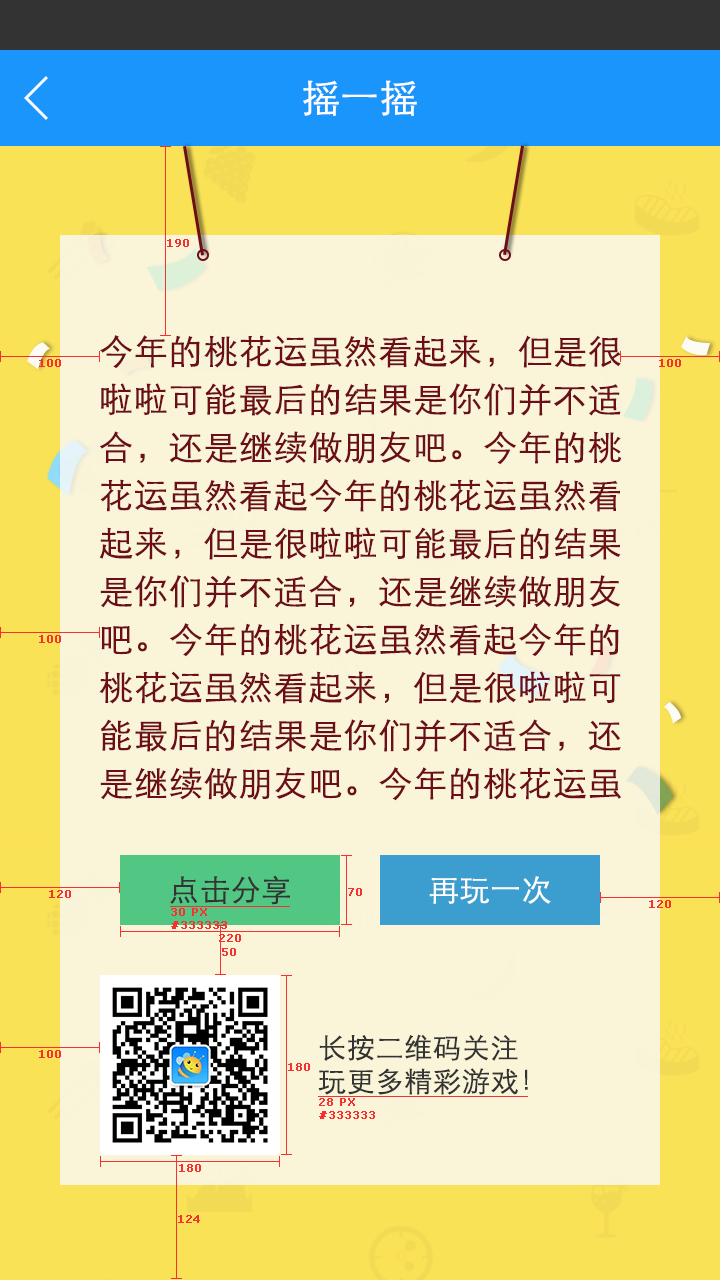
<style>
.page{position:relative;width:720px;height:1280px;background:#faf5d9}
.page>*{position:absolute;margin:0}
.t1{font:38px "STXihei";color:#ffffff;font-weight:bold}
.t2{font:11px "Verdana";color:#f83030;font-weight:bold}
.t3{font:34px/48px "STXihei";color:#6d0d18;font-weight:bold}
.t4{font:30px "STXihei";color:#333333;font-weight:bold}
.t5{font:30px "STXihei";color:#ffffff;font-weight:bold}
.t6{font:28px "STXihei";color:#333333;font-weight:bold}
</style>
<div class="page">
<p class="t1" style="left:303px;top:80px;width:114px;height:36px">摇一摇</p>
<p class="t2" style="left:167px;top:239px;width:22px;height:8px">190</p>
<p class="t3" style="left:99px;top:335px;width:523px;height:466px">今年的桃花运虽然看起来，但是很<br>啦啦可能最后的结果是你们并不适<br>合，还是继续做朋友吧。今年的桃<br>花运虽然看起今年的桃花运虽然看<br>起来，但是很啦啦可能最后的结果<br>是你们并不适合，还是继续做朋友<br>吧。今年的桃花运虽然看起今年的<br>桃花运虽然看起来，但是很啦啦可<br>能最后的结果是你们并不适合，还<br>是继续做朋友吧。今年的桃花运虽</p>
<p class="t2" style="left:39px;top:359px;width:22px;height:8px">100</p>
<p class="t2" style="left:659px;top:359px;width:22px;height:8px">100</p>
<p class="t2" style="left:39px;top:635px;width:22px;height:8px">100</p>
<p class="t4" style="left:170px;top:875px;width:120px;height:30px">点击分享</p>
<p class="t5" style="left:429px;top:876px;width:122px;height:28px">再玩一次</p>
<p class="t2" style="left:49px;top:890px;width:22px;height:8px">120</p>
<p class="t2" style="left:348px;top:888px;width:14px;height:8px">70</p>
<p class="t2" style="left:649px;top:900px;width:22px;height:8px">120</p>
<p class="t2" style="left:171px;top:908px;width:56px;height:21px">30 PX<br>#333333</p>
<p class="t2" style="left:219px;top:934px;width:22px;height:8px">220</p>
<p class="t2" style="left:222px;top:948px;width:14px;height:8px">50</p>
<p class="t6" style="left:318px;top:1034px;width:210px;height:61px">长按二维码关注<br>玩更多精彩游戏！</p>
<p class="t2" style="left:39px;top:1050px;width:22px;height:8px">100</p>
<p class="t2" style="left:288px;top:1063px;width:22px;height:8px">180</p>
<p class="t2" style="left:319px;top:1098px;width:56px;height:21px">28 PX<br>#333333</p>
<p class="t2" style="left:179px;top:1164px;width:22px;height:8px">180</p>
<p class="t2" style="left:178px;top:1215px;width:22px;height:8px">124</p>
</div>
